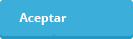
<style>
.page{position:relative;width:133px;height:39px;background:#3bafda}
.page>*{position:absolute;margin:0}
.t1{font:12px "OpenSans-Bold";color:#ffffff}
</style>
<div class="page">
<p class="t1" style="left:19px;top:13px;width:48px;height:12px">Aceptar</p>
</div>
